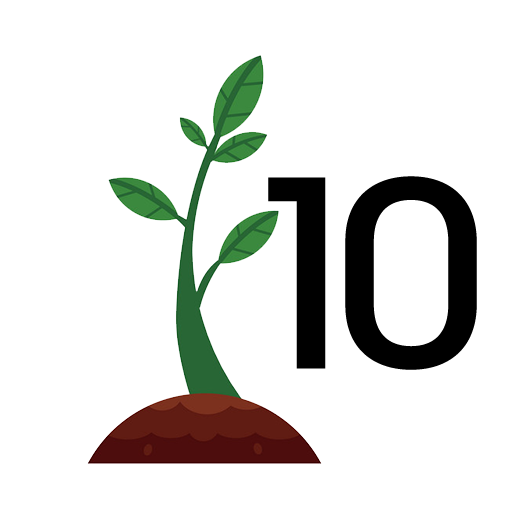
<style>
.page{position:relative;width:512px;height:512px;background:#ffffff}
.page>*{position:absolute;margin:0}
.t1{font:254.2px "PierSans-Regular";letter-spacing:-0.01em;color:#000000}
</style>
<div class="page">
<p class="t1" style="left:268px;top:176px;width:209px;height:194px">10</p>
</div>
